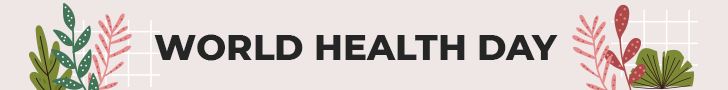
<style>
.page{position:relative;width:728px;height:90px;background:#efe6e6}
.page>*{position:absolute;margin:0}
.t1{font:35.8px "Montserrat-ExtraBold";color:#252525}
</style>
<div class="page">
<p class="t1" style="left:154px;top:34px;width:404px;height:27px">WORLD HEALTH DAY</p>
</div>
